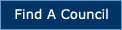
<style>
.page{position:relative;width:122px;height:30px;background:#003366}
.page>*{position:absolute;margin:0}
.t1{font:13px "Verdana";letter-spacing:0.01em;color:#ffffff}
</style>
<div class="page">
<p class="t1" style="left:15px;top:8px;width:93px;height:12px">Find A Council</p>
</div>
